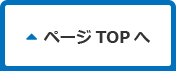
<style>
.page{position:relative;width:176px;height:71px;background:#ffffff}
.page>*{position:absolute;margin:0}
.t1{font:16px "Meiryo-Bold";color:#333333}
</style>
<div class="page">
<p class="t1" style="left:43px;top:30px;width:107px;height:14px">ページTOPへ</p>
</div>
